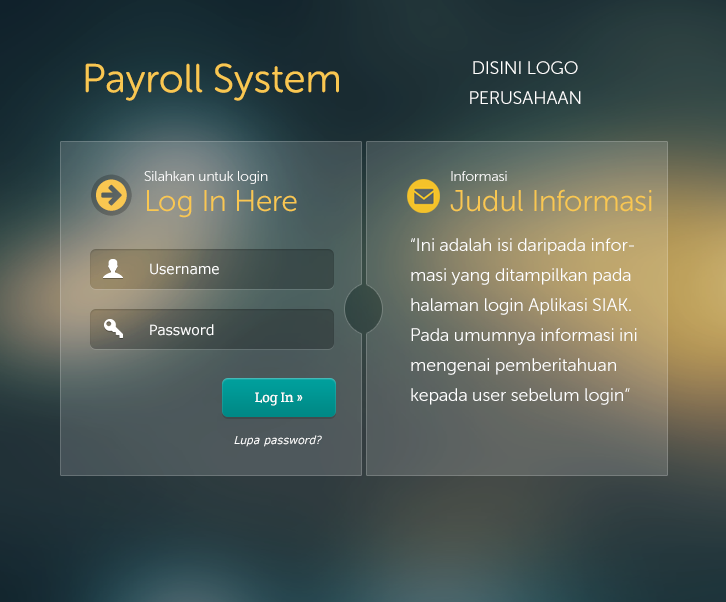
<style>
.page{position:relative;width:726px;height:602px}
.page>*{position:absolute;margin:0}
.t1{font:40px "MuseoSansRounded-300";color:#f9c751}
.t2{font:18px/30px "MuseoSansRounded-300";color:#ffffff}
.t3{font:14px/30px "MuseoSansRounded-300";color:#ffffff}
.t4{font:30px/30px "MuseoSansRounded-300";color:#f9c751}
.t5{font:14px "Verdana";color:#ffffff}
.t6{font:14px "CreteRound-Regular";color:#ffffff}
.t7{font:11px "Verdana-Italic";color:#ffffff}
</style>
<div class="page">
<p class="t1" style="left:85px;top:63px;width:254px;height:38px">Payroll System</p>
<p class="t2" style="left:470px;top:61px;width:111px;height:43px;text-align:center">DISINI LOGO <br>PERUSAHAAN</p>
<p class="t3" style="left:144px;top:171px;width:153px;height:47px">Silahkan untuk login<br><span class="t4">Log In Here</span></p>
<p class="t4" style="left:450px;top:171px;width:202px;height:41px"><span class="t3">Informasi <br></span>Judul Informasi</p>
<p class="t2" style="left:411px;top:238px;width:226px;height:167px">“Ini adalah isi daripada informasi yang ditampilkan pada halaman login Aplikasi SIAK. Pada umumnya informasi ini mengenai pemberitahuan kepada user sebelum login”</p>
<p class="t5" style="left:150px;top:263px;width:69px;height:12px">Username</p>
<p class="t5" style="left:150px;top:324px;width:64px;height:12px">Password</p>
<p class="t6" style="left:255px;top:392px;width:48px;height:14px">Log In »</p>
<p class="t7" style="left:234px;top:435px;width:88px;height:12px">Lupa password?</p>
</div>
